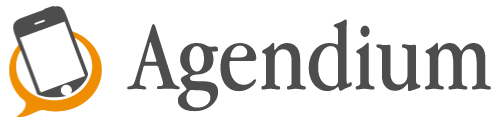
<style>
.page{position:relative;width:503px;height:130px;background:#ffffff}
.page>*{position:absolute;margin:0}
.t1{font:100px "AppleGaramond";color:#4d4d4d}
</style>
<div class="page">
<p class="t1" style="left:127px;top:19px;width:364px;height:93px">Agendium</p>
</div>
